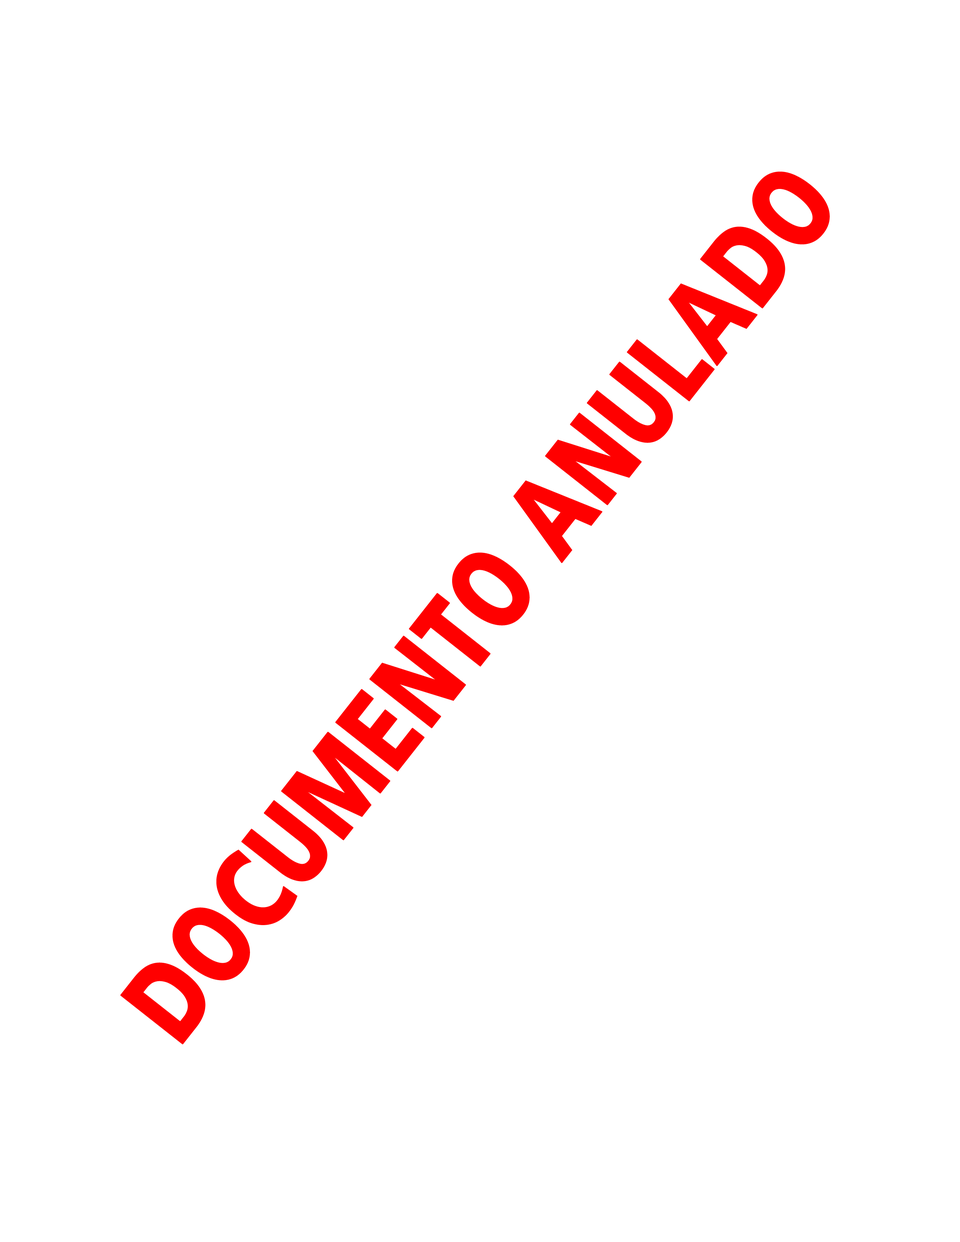
<style>
.page{position:relative;width:960px;height:1242px;background:#ffffff}
.page>*{position:absolute;margin:0}
.t1{font:112.9px "ArticulateExtrabold";color:#ff0000;font-weight:bold;scale:0.75 1}
</style>
<div class="page">
<p class="t1" style="left:120px;top:172px;width:710px;height:873px;rotate:-52deg">DOCUMENTO ANULADO</p>
</div>
